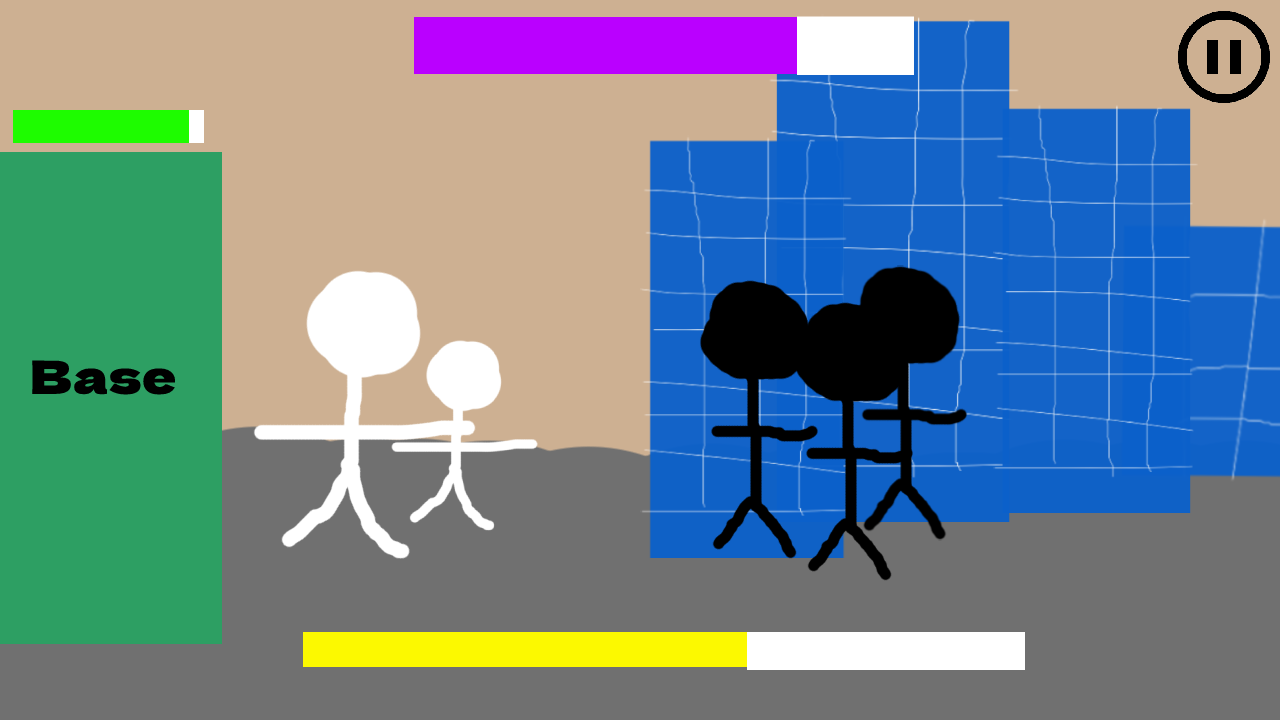
<style>
.page{position:relative;width:1280px;height:720px;background:#cdb092}
.page>*{position:absolute;margin:0}
.t1{font:46px "DelaGothicOne-Regular";color:#000000;font-weight:bold}
</style>
<div class="page">
<p class="t1" style="left:32px;top:360px;width:144px;height:35px">Base</p>
</div>
